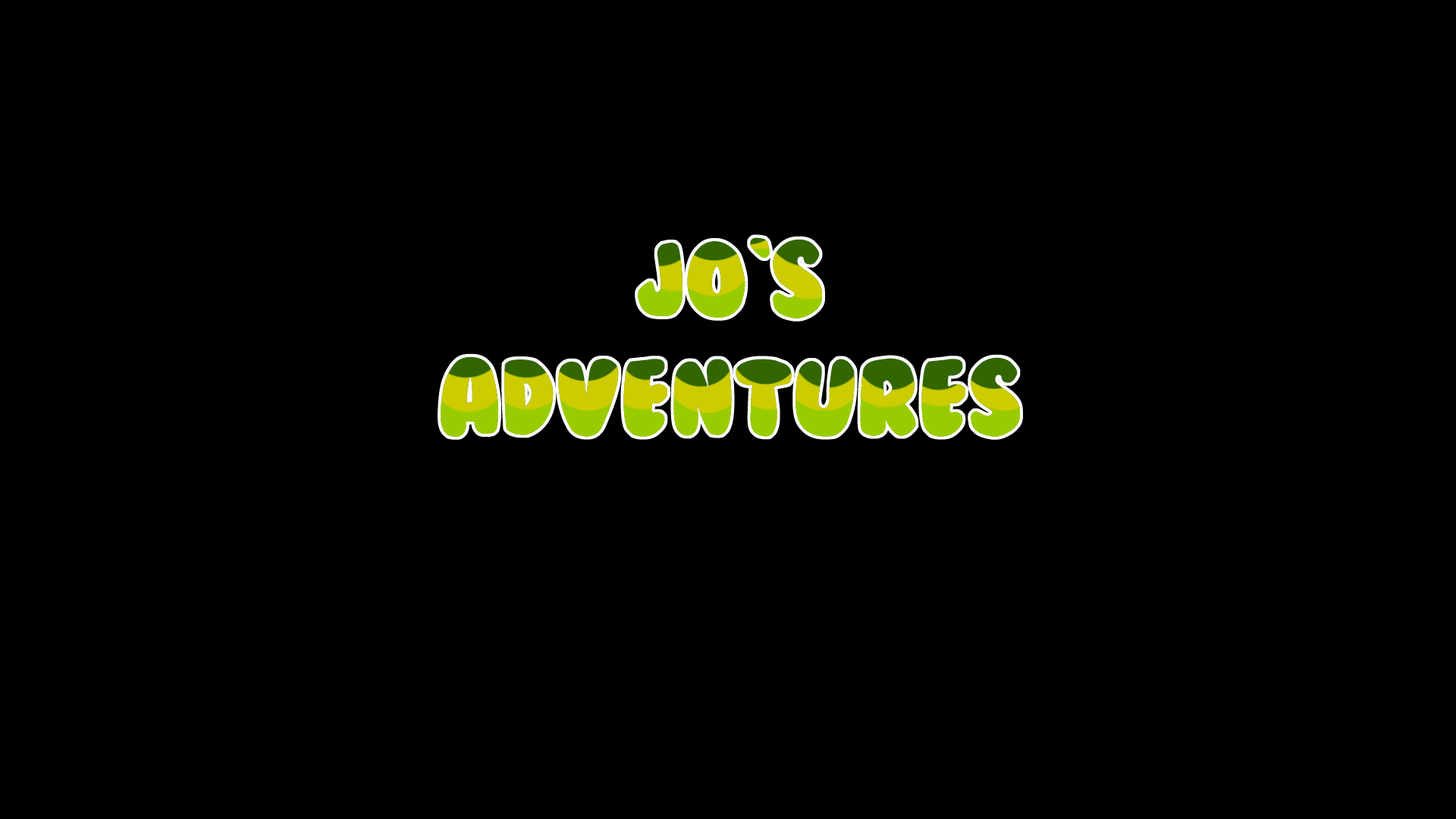
<style>
.page{position:relative;width:1456px;height:819px;background:#000000}
.page>*{position:absolute;margin:0}
.t1{font:98.6px "BubbleGum"}
</style>
<div class="page">
<p class="t1" style="left:441px;top:237px;width:579px;height:200px;text-align:center">Jo`s <br>Adventures</p>
</div>
